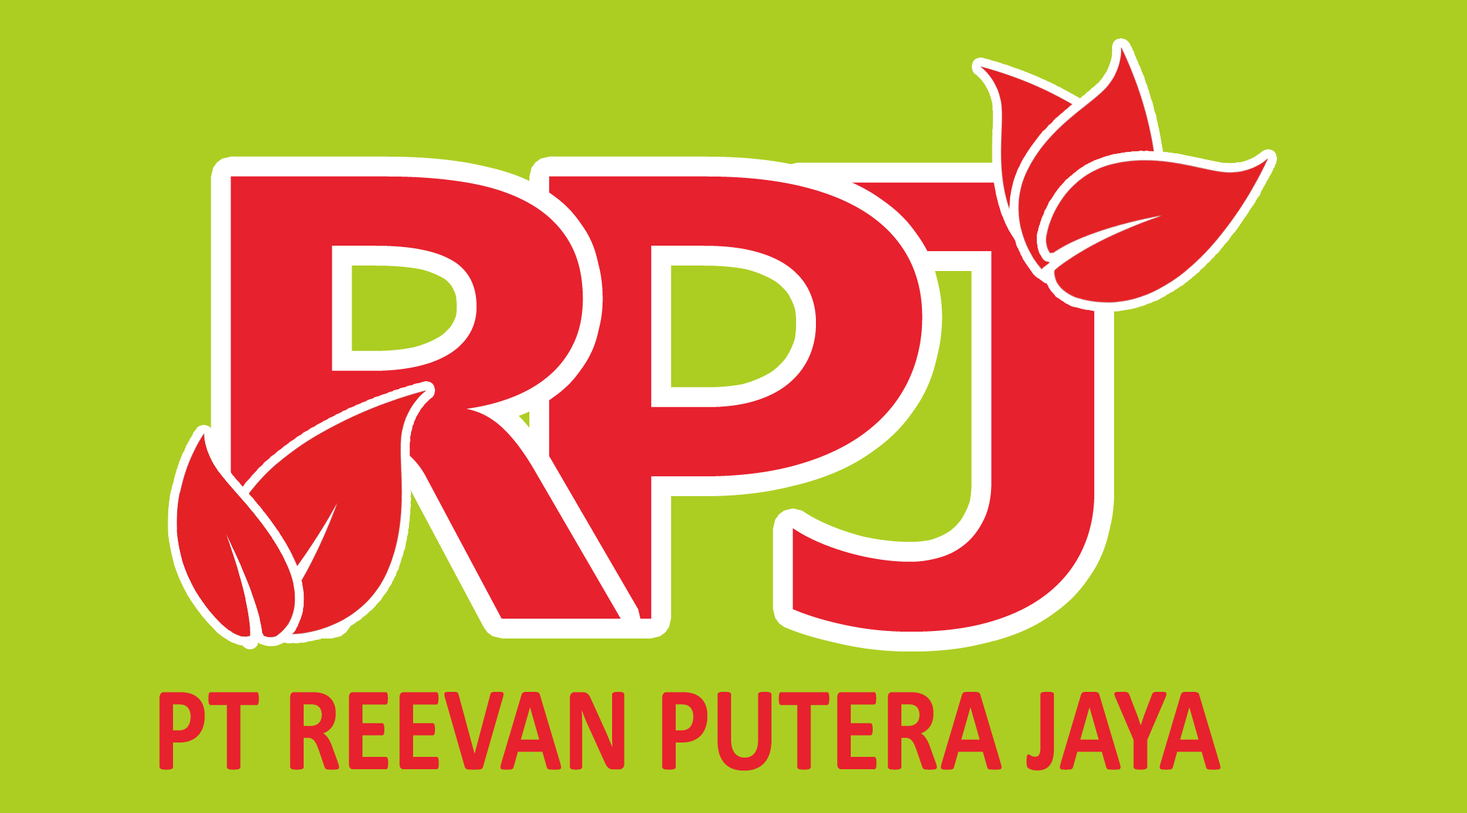
<style>
.page{position:relative;width:1467px;height:813px;background:#acce22}
.page>*{position:absolute;margin:0}
.t1{font:692.1px "Consolas-Bold";color:#e7212e;scale:1.22 1}
.t2{font:122.1px "Calibri-Bold";color:#e7212e;scale:0.85 1}
</style>
<div class="page">
<p class="t1" style="left:231px;top:176px;width:390px;height:442px">R</p>
<p class="t1" style="left:549px;top:176px;width:374px;height:442px">P</p>
<p class="t1" style="left:793px;top:182px;width:301px;height:449px">J</p>
<p class="t2" style="left:159px;top:692px;width:1062px;height:78px">PT REEVAN PUTERA JAYA</p>
</div>
